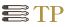
<style>
.page{position:relative;width:69px;height:27px;background:#ffffff}
.page>*{position:absolute;margin:0}
.t1{font:22px "RyuminPro-ExBold";letter-spacing:-0.04em;color:#af9441}
</style>
<div class="page">
<p class="t1" style="left:33px;top:6px;width:31px;height:16px">TP</p>
</div>
